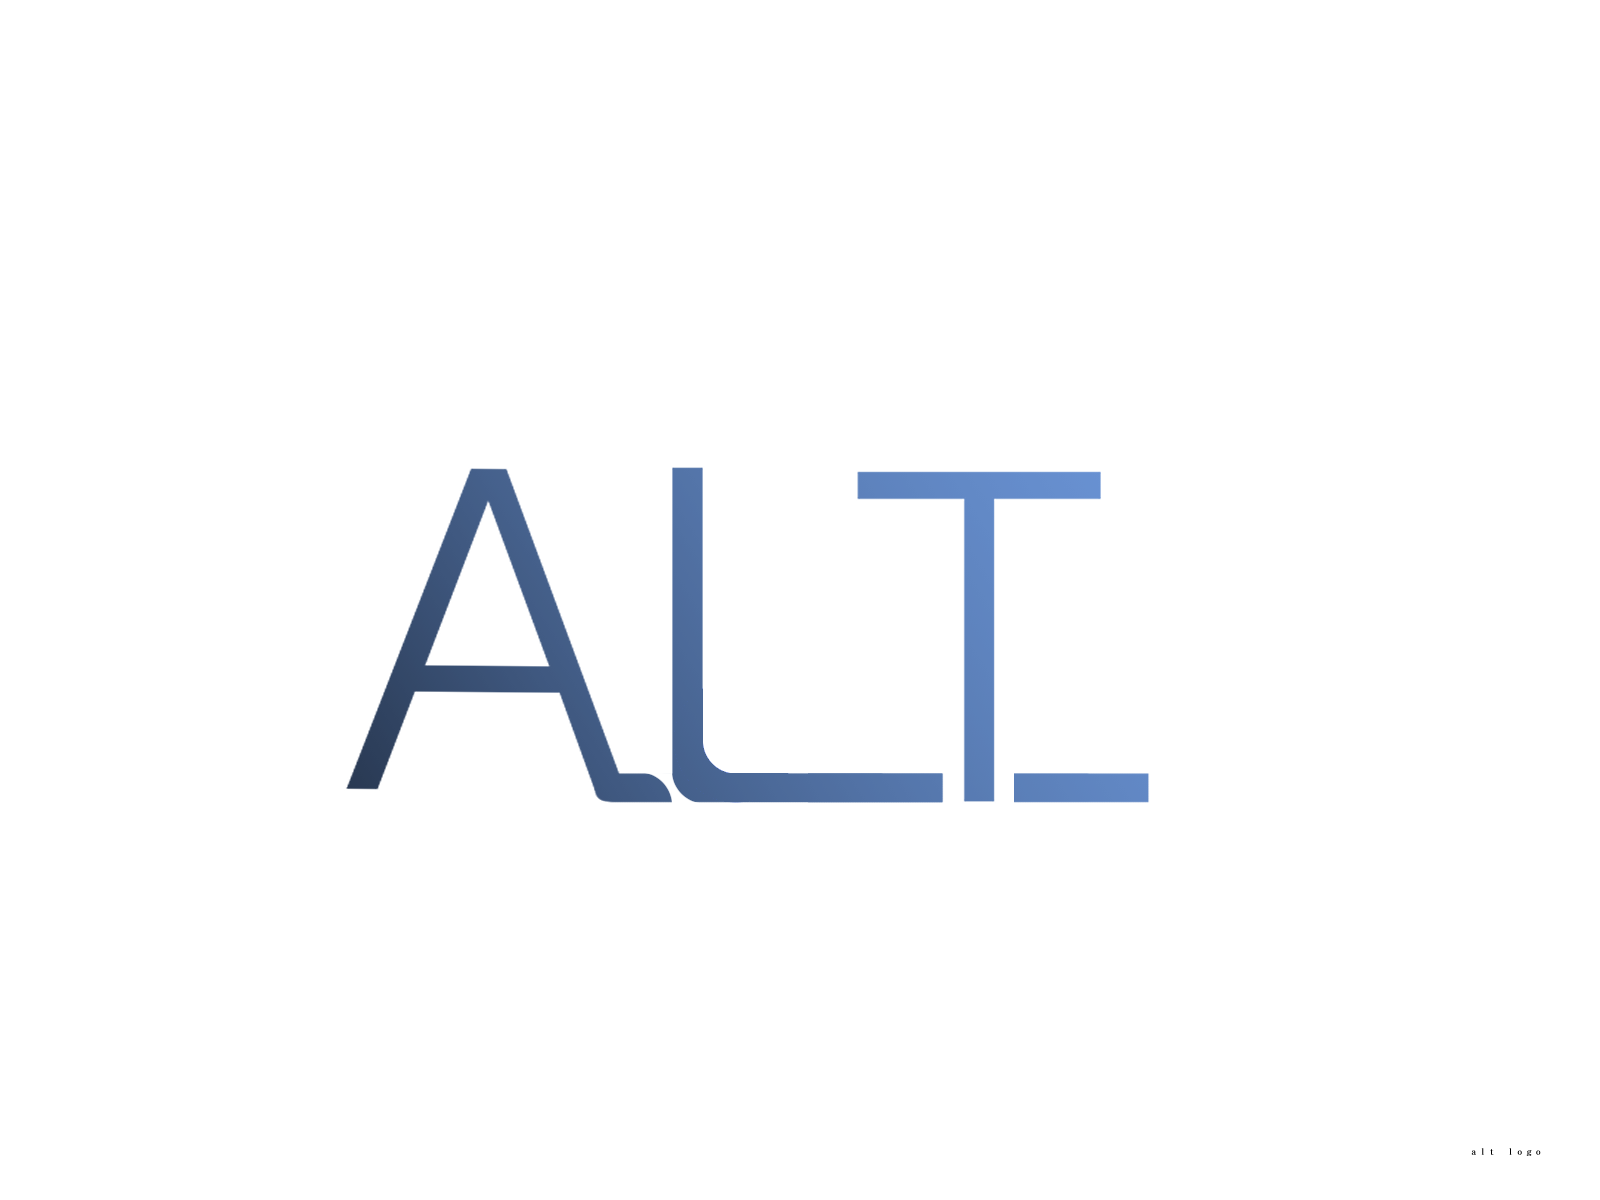
<style>
.page{position:relative;width:1600px;height:1200px;background:#ffffff}
.page>*{position:absolute;margin:0}
.t1{font:9px "AdobeMyungjoStd-Medium";color:#000000}
</style>
<div class="page">
<p class="t1" style="left:1471px;top:1148px;width:70px;height:8px">ａｌｔ　ｌｏｇｏ</p>
</div>
